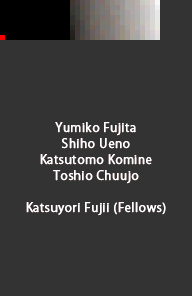
<style>
.page{position:relative;width:192px;height:296px;background:#333333}
.page>*{position:absolute;margin:0}
.t1{font:12px/16px "KozGoPr6N-Regular";letter-spacing:0.025em;color:#ffffff;font-weight:bold}
</style>
<div class="page">
<p class="t1" style="left:26px;top:122px;width:140px;height:94px;text-align:center">Yumiko Fujita<br>Shiho Ueno<br>Katsutomo Komine<br>Toshio Chuujo<br><br>Katsuyori Fujii (Fellows)</p>
</div>
